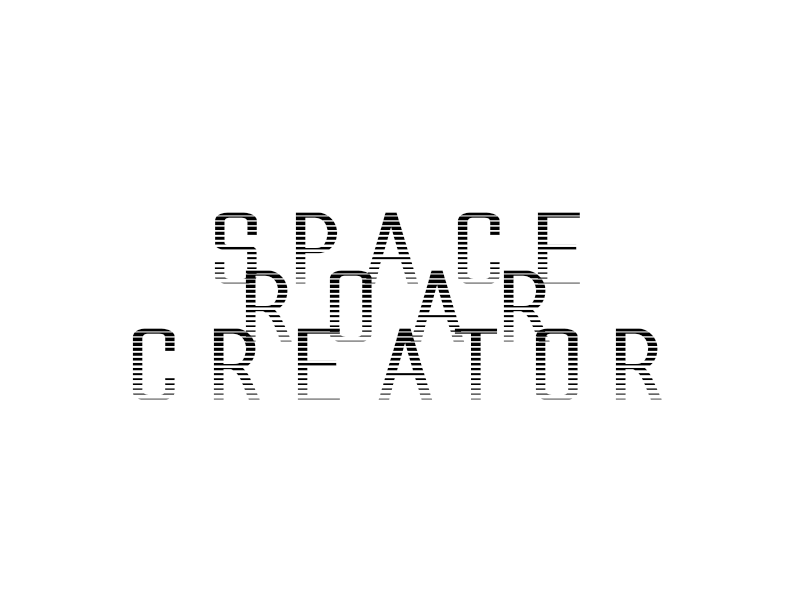
<style>
.page{position:relative;width:800px;height:600px;background:#ffffff}
.page>*{position:absolute;margin:0}
.t1{font:95px/58px "AlienLeagueGradientBold";color:#000000;scale:2 1}
</style>
<div class="page">
<p class="t1" style="left:132px;top:212px;width:530px;height:188px;text-align:center">SPACE<br>ROAR<br>CREATOR</p>
</div>
